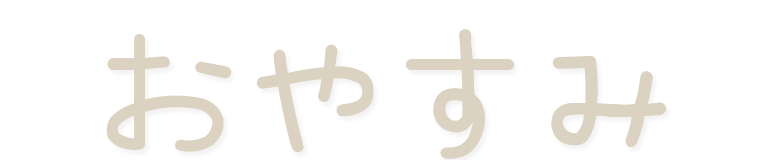
<style>
.page{position:relative;width:771px;height:160px;background:#ffffff}
.page>*{position:absolute;margin:0}
.t1{font:166.7px "KAWAIITEGAKIMOJI";color:#dcd2c2}
</style>
<div class="page">
<p class="t1" style="left:106px;top:29px;width:561px;height:130px">おやすみ</p>
</div>
